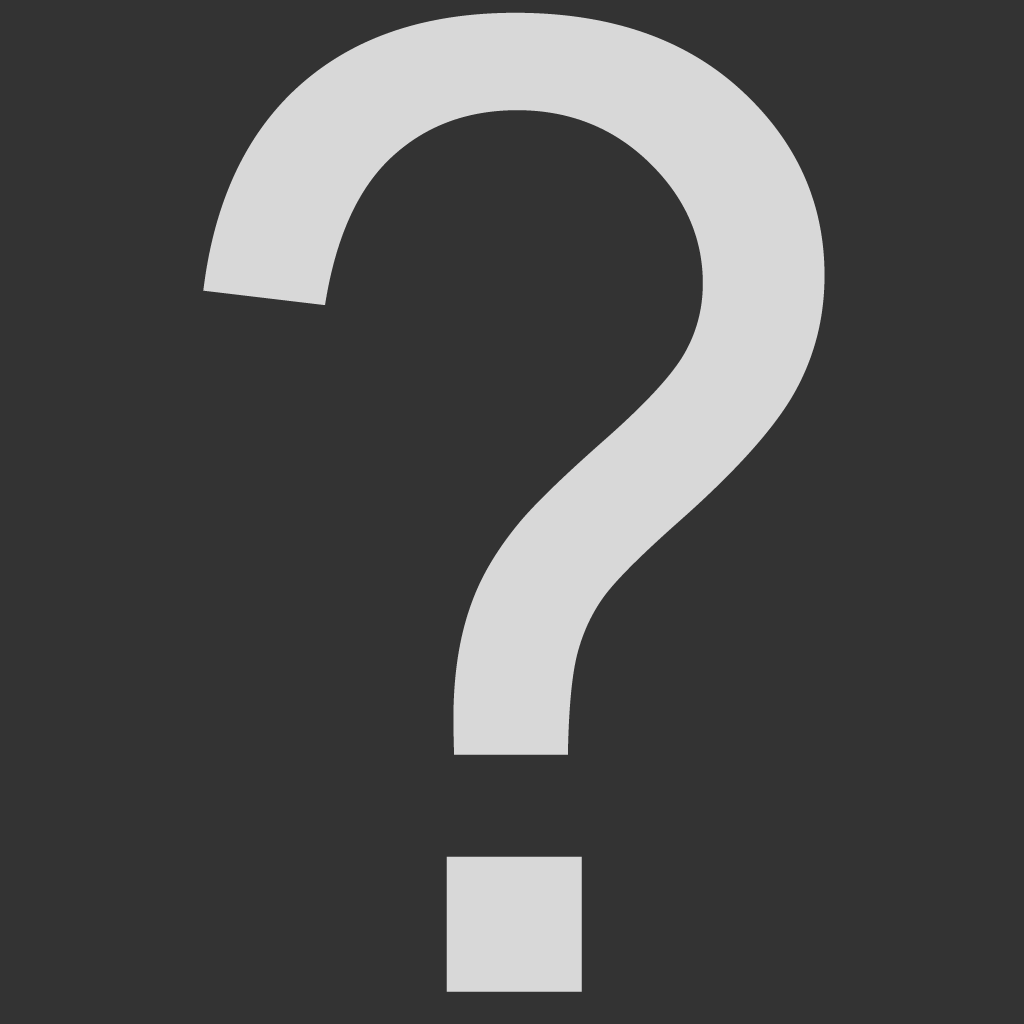
<style>
.page{position:relative;width:1024px;height:1024px;background:#333333}
.page>*{position:absolute;margin:0}
.t1{font:1344.2px "ArialMT";color:#d8d8d8}
</style>
<div class="page">
<p class="t1" style="left:203px;top:12px;width:622px;height:980px">?</p>
</div>
